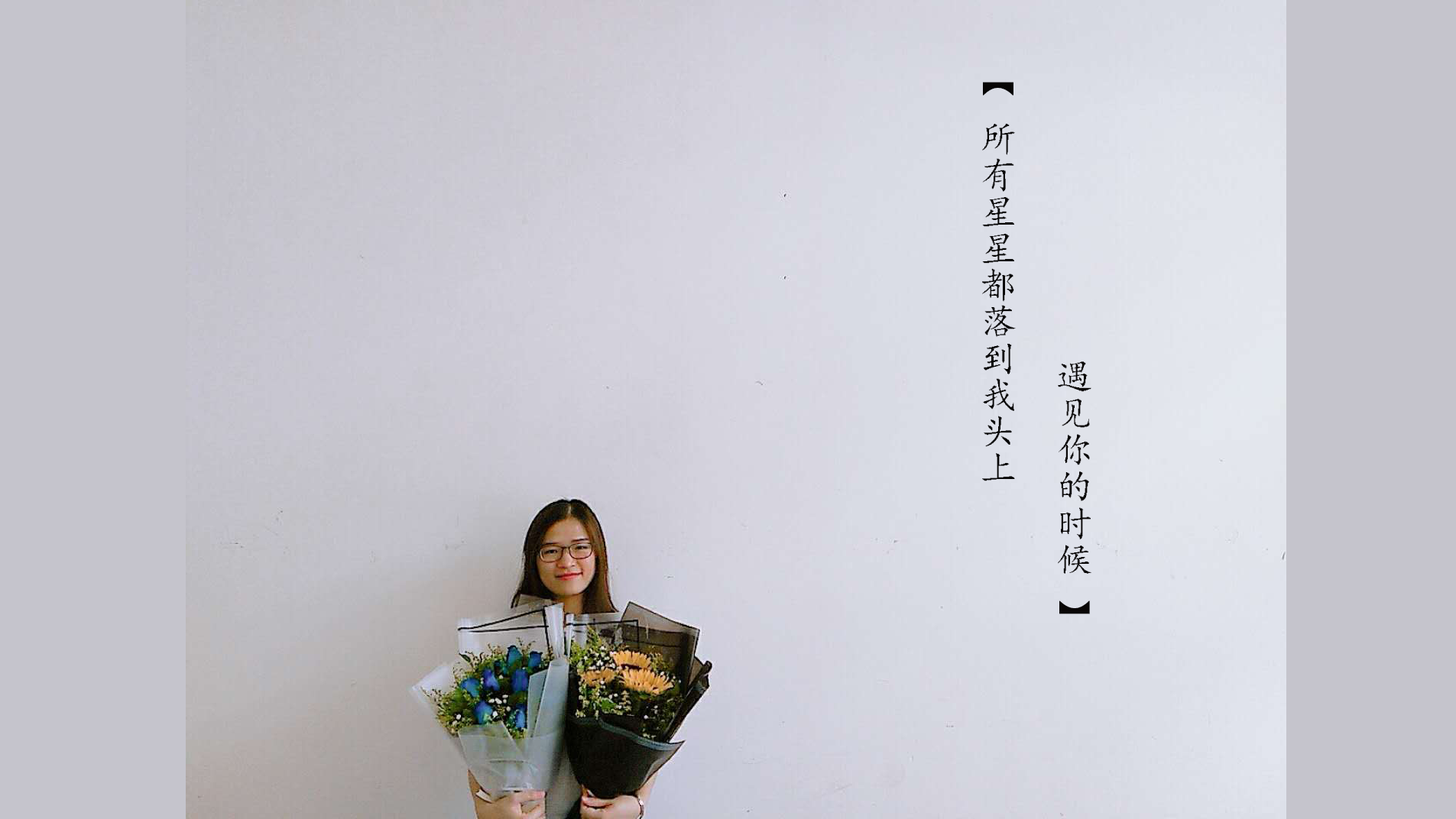
<style>
.page{position:relative;width:1456px;height:819px;background:#c5c4cc}
.page>*{position:absolute;margin:0}
.t1{font:36.7px "¿¬Ìå";color:#060505}
.t2{font:36.7px/76.4px "¿¬Ìå";color:#090606}
.t3{font:36.7px/76.4px "SimSun";color:#090606}
.t4{font:36.7px "SimSun";color:#060505}
</style>
<div class="page">
<p class="t1" style="left:982px;top:82px;width:109px;height:532px"><span class="t2">遇见你的时候 </span><span class="t3">】<br></span><span class="t4">【 </span>所有星星都落到我头上</p>
</div>
